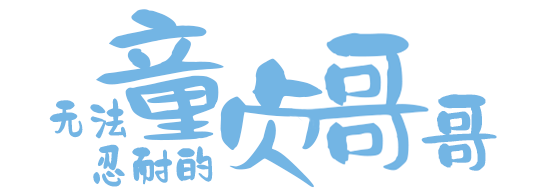
<style>
.page{position:relative;width:559px;height:195px;background:#ffffff}
.page>*{position:absolute;margin:0}
.t1{font:82.9px "AaDingXiangShouShu";color:#73b5e4;font-weight:bold;scale:1.34 1}
.t2{font:78.9px "AaDingXiangShouShu";color:#73b5e4;font-weight:bold;scale:1.34 1}
.t3{font:26.7px "AaDingXiangShouShu";color:#73b5e4;font-weight:bold;scale:0.94 1}
.t4{font:47.7px "AaDingXiangShouShu";letter-spacing:-0.4em;color:#73b5e4;font-weight:bold;scale:1.14 1}
</style>
<div class="page">
<p class="t1" style="left:96px;top:9px;width:128px;height:132px;rotate:-5deg">童</p>
<p class="t2" style="left:220px;top:58px;width:103px;height:130px;rotate:12deg">贞</p>
<p class="t3" style="left:49px;top:98px;width:78px;height:41px">无法</p>
<p class="t4" style="left:421px;top:94px;width:76px;height:77px">哥</p>
<p class="t3" style="left:93px;top:144px;width:120px;height:43px">忍耐的</p>
</div>
